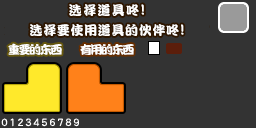
<style>
.page{position:relative;width:256px;height:128px;background:#333333}
.page>*{position:absolute;margin:0}
.t1{font:13px "DFPKanTingLiuW9";letter-spacing:0.1em;color:#ffffff}
.t2{font:15px "DFPKanTingLiuW9";letter-spacing:0.1em;color:#ffffff}
.t3{font:13px "DFPKanTingLiuW9";letter-spacing:0.05em;color:#ffffff}
.t4{font:15px "DFPKanTingLiuW9";letter-spacing:0.05em;color:#ffffff}
.t5{font:12px "DFPKanTingLiuW9";letter-spacing:-0.12em;color:#ffffff}
</style>
<div class="page">
<p class="t1" style="left:69px;top:4px;width:75px;height:12px">选择道具咚<span class="t2">!</span></p>
<p class="t3" style="left:30px;top:24px;width:154px;height:12px">选择要使用道具的伙伴咚<span class="t4">!</span></p>
<p class="t5" style="left:8px;top:43px;width:54px;height:12px">重要的东西</p>
<p class="t5" style="left:80px;top:44px;width:54px;height:11px">有用的东西</p>
</div>
